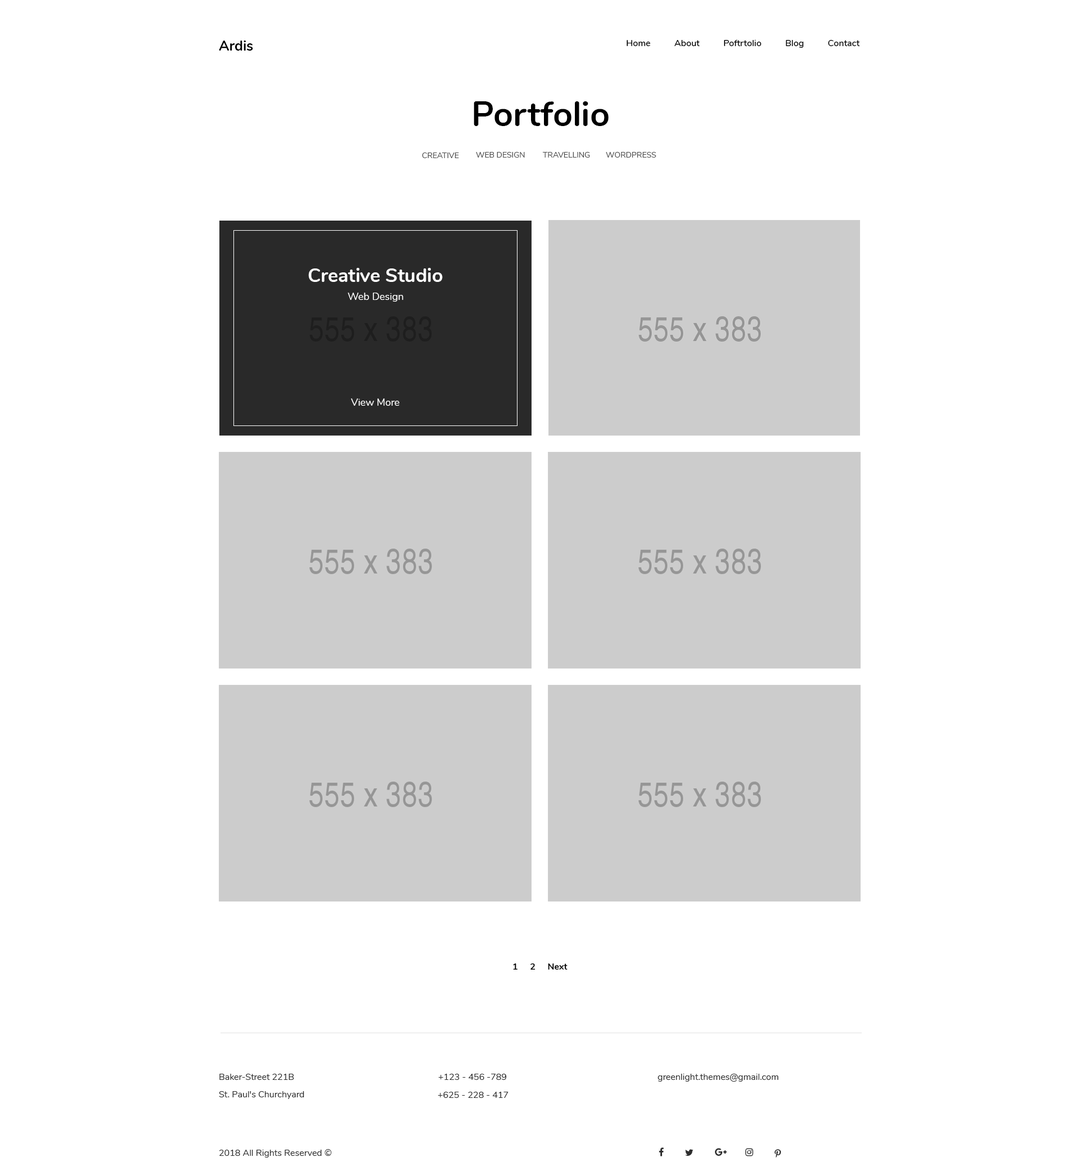
<style>
.page{position:relative;width:1080px;height:1166px;background:#ffffff}
.page>*{position:absolute;margin:0}
.t1{font:14.1px "Nunito-Bold";color:#010101}
.t2{font:9px "Nunito-SemiBold";color:#000000}
.t3{font:34.3px "Nunito-Bold";color:#000000}
.t4{font:7.9px "Nunito-Regular";color:#4b4b4b;text-transform:uppercase}
.t5{font:19.1px "Nunito-Bold";color:#ffffff}
.t6{font:10.1px "Nunito-Regular";color:#ffffff}
.t7{font:9px "Nunito-Bold";color:#000000}
.t8{font:9px "Nunito-Regular";color:#2e2e2e}
</style>
<div class="page">
<p class="t1" style="left:219px;top:40px;width:34px;height:11px">Ardis</p>
<p class="t2" style="left:627px;top:40px;width:233px;height:8px">Home          About          Poftrtolio          Blog          Contact</p>
<p class="t3" style="left:474px;top:101px;width:135px;height:25px">Portfolio</p>
<p class="t4" style="left:422px;top:152px;width:37px;height:6px">Creative</p>
<p class="t4" style="left:476px;top:152px;width:49px;height:6px">Web design</p>
<p class="t4" style="left:542px;top:152px;width:48px;height:6px">travelling</p>
<p class="t4" style="left:606px;top:152px;width:50px;height:6px">wordpress</p>
<p class="t5" style="left:308px;top:268px;width:135px;height:14px">Creative Studio</p>
<p class="t6" style="left:348px;top:292px;width:55px;height:10px">Web Design</p>
<p class="t6" style="left:351px;top:398px;width:48px;height:8px">View More</p>
<p class="t7" style="left:513px;top:963px;width:55px;height:6px">1     2     Next</p>
<p class="t8" style="left:219px;top:1073px;width:75px;height:6px">Baker-Street 221B</p>
<p class="t8" style="left:438px;top:1073px;width:69px;height:6px">+123 - 456 -789</p>
<p class="t8" style="left:658px;top:1073px;width:120px;height:8px">greenlight.themes@gmail.com</p>
<p class="t8" style="left:219px;top:1091px;width:85px;height:8px">St. Paul's Churchyard</p>
<p class="t8" style="left:438px;top:1091px;width:70px;height:6px">+625 - 228 - 417</p>
<p class="t8" style="left:219px;top:1149px;width:113px;height:8px">2018 All Rights Reserved ©</p>
</div>
